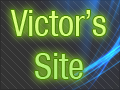
<style>
.page{position:relative;width:120px;height:90px}
.page>*{position:absolute;margin:0}
.t1{font:36px "HelveticaNeueLT-Condensed";letter-spacing:-0.01em}
</style>
<div class="page">
<p class="t1" style="left:10px;top:10px;width:96px;height:69px;text-align:center">Victor’s<br>Site</p>
</div>
